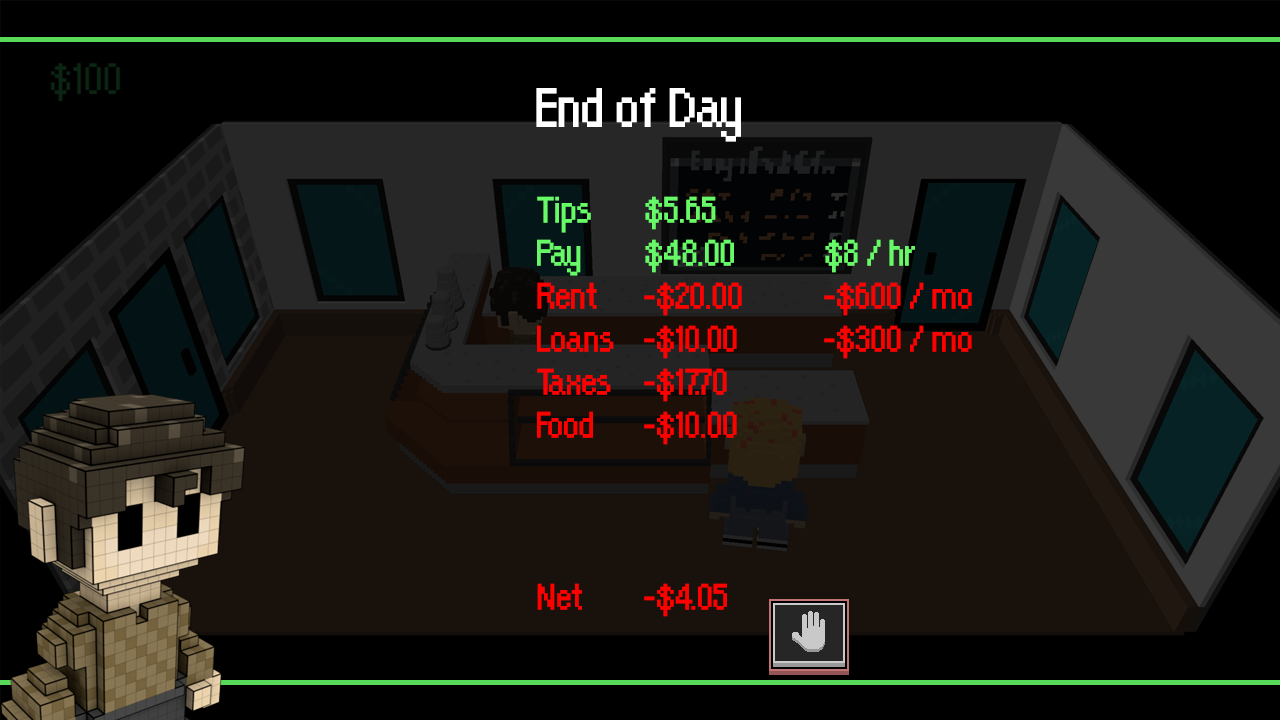
<style>
.page{position:relative;width:1280px;height:720px;background:#000000}
.page>*{position:absolute;margin:0}
.t1{font:60px "OrangeKid";letter-spacing:-0.01em;color:#ffffff}
.t2{font:40px/43px "OrangeKid";letter-spacing:-0.01em;color:#ff0000}
.t3{font:40px/43px "OrangeKid";letter-spacing:-0.01em;color:#67f967}
</style>
<div class="page">
<p class="t1" style="left:536px;top:88px;width:205px;height:54px">End of Day</p>
<p class="t2" style="left:537px;top:196px;width:435px;height:421px"><span class="t3">Tips   $5.65<br>Pay   $48.00   $8 / hr<br></span>Rent   -$20.00   -$600 / mo<br>Loans  -$10.00   -$300 / mo<br>Taxes  -$17.70<br>Food   -$10.00<br><br><br><br>Net   -$4.05</p>
</div>
